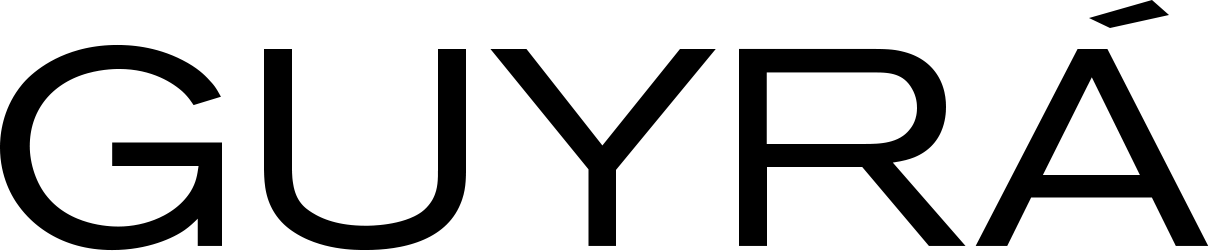
<style>
.page{position:relative;width:1209px;height:251px;background:#ffffff}
.page>*{position:absolute;margin:0}
.t1{font:278.4px "AkzidenzGroteskBQ-Ext";color:#000000;text-transform:uppercase}
</style>
<div class="page">
<p class="t1" style="left:0px;top:44px;width:1209px;height:207px">guyra</p>
</div>
